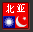
<style>
.page{position:relative;width:33px;height:32px;background:#f20000}
.page>*{position:absolute;margin:0}
.t1{font:10.4px "SimSun";color:#ffffff}
</style>
<div class="page">
<p class="t1" style="left:6px;top:4px;width:19px;height:9px">北亚</p>
</div>
